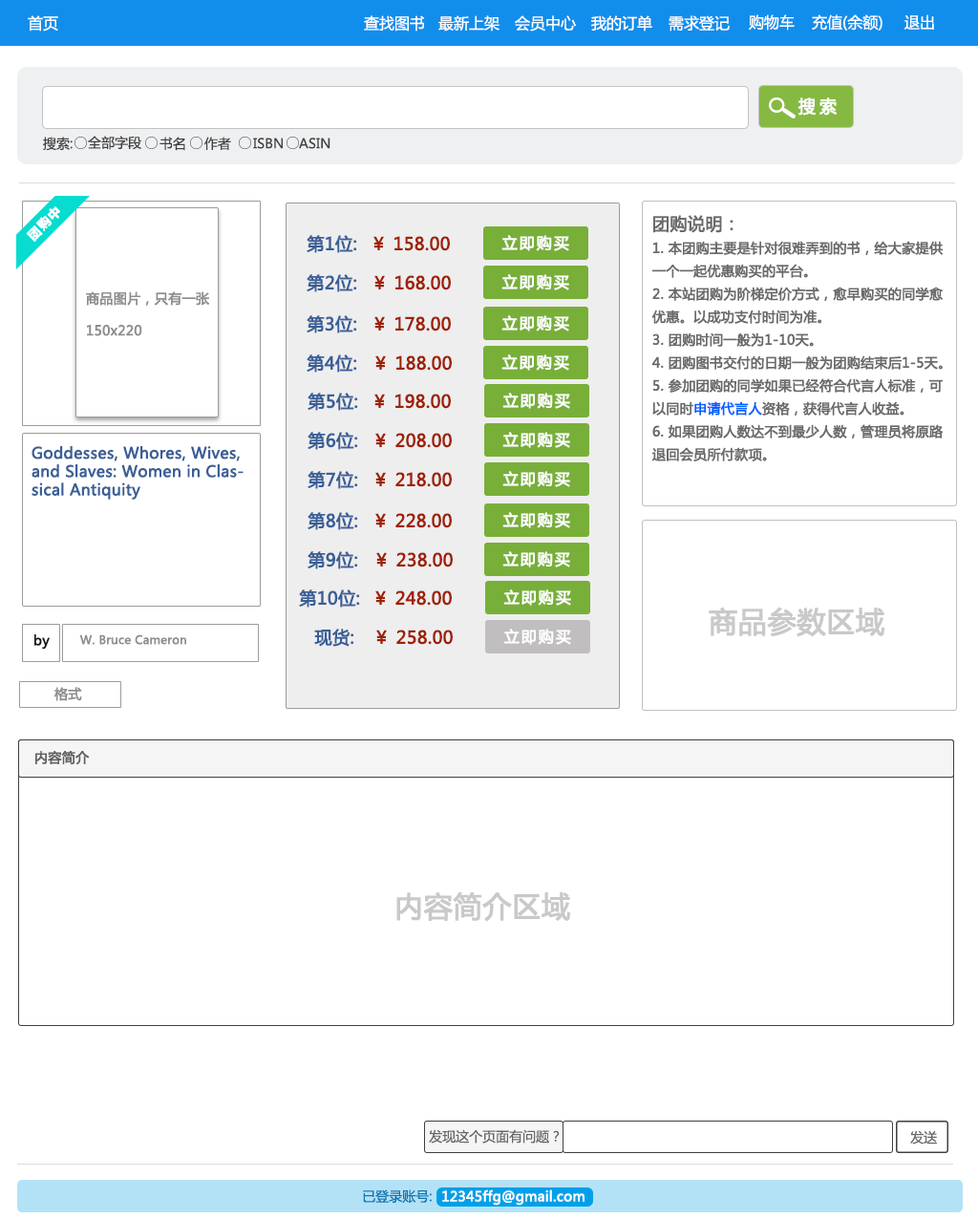
<style>
.page{position:relative;width:978px;height:1219px;background:#ffffff}
.page>*{position:absolute;margin:0}
.t1{font:15.3px "MicrosoftYaHei";color:#ffffff}
.t2{font:17.2px "MicrosoftYaHei";letter-spacing:0.2em;color:#ffffff;font-weight:bold}
.t3{font:13.4px "MicrosoftYaHei";color:#414040}
.t4{font:12.4px "MicrosoftYaHei-Bold";letter-spacing:0.1em;color:#fefefe;font-weight:bold}
.t5{font:13.4px/22.9px "MicrosoftYaHei";color:#6b6a6a;font-weight:bold}
.t6{font:17.2px/22.9px "MicrosoftYaHei";color:#6b6a6a;font-weight:bold}
.t7{font:13.4px/22.9px "MicrosoftYaHei";color:#0060ff;font-weight:bold}
.t8{font:17.2px "MicrosoftYaHei";color:#3a5f98;font-weight:bold}
.t9{font:17.2px "MicrosoftYaHei";color:#9f2104;font-weight:bold}
.t10{font:15.3px "MicrosoftYaHei";letter-spacing:0.1em;color:#ffffff;font-weight:bold}
.t11{font:13.4px "MicrosoftYaHei";color:#8e8e8e;font-weight:bold}
.t12{font:15.3px "MicrosoftYaHei";color:#3a5f98;font-weight:bold}
.t13{font:28.7px "MicrosoftYaHei";color:#cac9c9;font-weight:bold}
.t14{font:13.4px "MicrosoftYaHei";color:#161616;font-weight:bold}
.t15{font:11.5px "MicrosoftYaHei";color:#8e8e8e;font-weight:bold}
.t16{font:13.4px "MicrosoftYaHei";color:#615e5e;font-weight:bold}
.t17{font:13.4px "MicrosoftYaHei";color:#666464}
.t18{font:13.4px "MicrosoftYaHei";color:#0875ae}
.t19{font:13.4px "MicrosoftYaHei";color:#ffffff;font-weight:bold}
</style>
<div class="page">
<p class="t1" style="left:28px;top:15px;width:30px;height:17px">首页</p>
<p class="t1" style="left:364px;top:15px;width:61px;height:17px">查找图书</p>
<p class="t1" style="left:438px;top:15px;width:62px;height:17px">最新上架</p>
<p class="t1" style="left:515px;top:15px;width:61px;height:17px">会员中心</p>
<p class="t1" style="left:591px;top:15px;width:61px;height:17px">我的订单</p>
<p class="t1" style="left:669px;top:15px;width:61px;height:17px">需求登记</p>
<p class="t1" style="left:749px;top:14px;width:46px;height:17px">购物车</p>
<p class="t1" style="left:812px;top:14px;width:71px;height:17px">充值(余额)</p>
<p class="t1" style="left:905px;top:14px;width:29px;height:16px">退出</p>
<p class="t2" style="left:798px;top:97px;width:39px;height:19px">搜索</p>
<p class="t3" style="left:43px;top:137px;width:30px;height:14px">搜索:</p>
<p class="t3" style="left:88px;top:136px;width:53px;height:14px">全部字段</p>
<p class="t3" style="left:160px;top:137px;width:25px;height:14px">书名</p>
<p class="t3" style="left:204px;top:137px;width:27px;height:13px">作者</p>
<p class="t3" style="left:253px;top:138px;width:30px;height:11px">ISBN</p>
<p class="t3" style="left:299px;top:138px;width:32px;height:11px">ASIN</p>
<p class="t4" style="left:26px;top:206px;width:34px;height:36px;rotate:-45deg">团购中</p>
<p class="t5" style="left:652px;top:215px;width:292px;height:246px"><span class="t6">团购说明：<br></span>1. 本团购主要是针对很难弄到的书，给大家提供一个一起优惠购买的平台。<br>2. 本站团购为阶梯定价方式，愈早购买的同学愈优惠。以成功支付时间为准。<br>3. 团购时间一般为1-10天。<br>4. 团购图书交付的日期一般为团购结束后1-5天。<br>5. 参加团购的同学如果已经符合代言人标准，可以同时<span class="t7">申请代言人</span>资格，获得代言人收益。<br>6. 如果团购人数达不到最少人数，管理员将原路退回会员所付款项。</p>
<p class="t8" style="left:307px;top:235px;width:50px;height:18px">第1位:</p>
<p class="t9" style="left:374px;top:236px;width:76px;height:15px">￥ 158.00</p>
<p class="t10" style="left:502px;top:235px;width:67px;height:16px">立即购买</p>
<p class="t8" style="left:307px;top:274px;width:50px;height:18px">第2位:</p>
<p class="t9" style="left:374px;top:275px;width:77px;height:15px">￥ 168.00</p>
<p class="t10" style="left:502px;top:274px;width:67px;height:16px">立即购买</p>
<p class="t11" style="left:86px;top:291px;width:123px;height:45px">商品图片，只有一张<br><br>150x220</p>
<p class="t8" style="left:307px;top:315px;width:50px;height:18px">第3位:</p>
<p class="t9" style="left:374px;top:316px;width:77px;height:15px">￥ 178.00</p>
<p class="t10" style="left:502px;top:315px;width:67px;height:16px">立即购买</p>
<p class="t8" style="left:307px;top:354px;width:50px;height:19px">第4位:</p>
<p class="t9" style="left:375px;top:355px;width:77px;height:16px">￥ 188.00</p>
<p class="t10" style="left:502px;top:354px;width:67px;height:17px">立即购买</p>
<p class="t8" style="left:308px;top:393px;width:50px;height:18px">第5位:</p>
<p class="t9" style="left:374px;top:394px;width:77px;height:15px">￥ 198.00</p>
<p class="t10" style="left:502px;top:393px;width:68px;height:16px">立即购买</p>
<p class="t8" style="left:308px;top:432px;width:50px;height:18px">第6位:</p>
<p class="t9" style="left:375px;top:433px;width:77px;height:15px">￥ 208.00</p>
<p class="t10" style="left:502px;top:432px;width:68px;height:16px">立即购买</p>
<p class="t12" style="left:32px;top:446px;width:212px;height:54px">Goddesses, Whores, Wives, and Slaves: Women in Classical Antiquity</p>
<p class="t8" style="left:308px;top:471px;width:50px;height:18px">第7位:</p>
<p class="t9" style="left:375px;top:472px;width:77px;height:15px">￥ 218.00</p>
<p class="t10" style="left:502px;top:471px;width:68px;height:16px">立即购买</p>
<p class="t8" style="left:308px;top:512px;width:50px;height:18px">第8位:</p>
<p class="t9" style="left:375px;top:513px;width:77px;height:15px">￥ 228.00</p>
<p class="t10" style="left:502px;top:512px;width:68px;height:16px">立即购买</p>
<p class="t8" style="left:308px;top:551px;width:50px;height:18px">第9位:</p>
<p class="t9" style="left:376px;top:552px;width:77px;height:15px">￥ 238.00</p>
<p class="t10" style="left:502px;top:551px;width:68px;height:16px">立即购买</p>
<p class="t8" style="left:299px;top:589px;width:61px;height:19px">第10位:</p>
<p class="t9" style="left:375px;top:590px;width:77px;height:16px">￥ 248.00</p>
<p class="t10" style="left:503px;top:589px;width:68px;height:17px">立即购买</p>
<p class="t13" style="left:709px;top:607px;width:177px;height:30px">商品参数区域</p>
<p class="t8" style="left:314px;top:629px;width:40px;height:18px">现货:</p>
<p class="t9" style="left:376px;top:630px;width:77px;height:15px">￥ 258.00</p>
<p class="t10" style="left:503px;top:629px;width:68px;height:16px">立即购买</p>
<p class="t14" style="left:34px;top:634px;width:16px;height:16px">by</p>
<p class="t15" style="left:79px;top:634px;width:107px;height:11px">W. Bruce Cameron</p>
<p class="t11" style="left:53px;top:687px;width:29px;height:14px">格式</p>
<p class="t16" style="left:35px;top:750px;width:55px;height:15px">内容简介</p>
<p class="t13" style="left:396px;top:891px;width:175px;height:31px">内容简介区域</p>
<p class="t17" style="left:429px;top:1129px;width:131px;height:14px">发现这个页面有问题？</p>
<p class="t17" style="left:910px;top:1130px;width:27px;height:14px">发送</p>
<p class="t18" style="left:363px;top:1189px;width:69px;height:15px">已登录账号:</p>
<p class="t19" style="left:442px;top:1189px;width:143px;height:17px">12345ffg@gmail.com</p>
</div>
